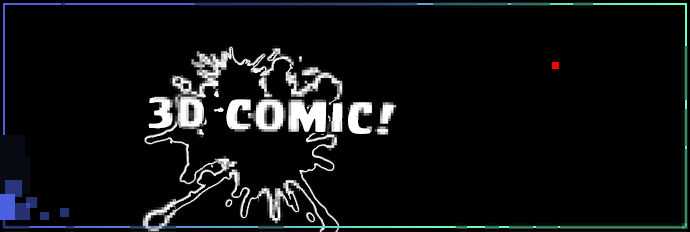
<style>
.page{position:relative;width:690px;height:232px;background:#000000}
.page>*{position:absolute;margin:0}
.t1{font:37.4px "CCBattleCry";letter-spacing:0.04em;color:#ffffff;scale:1.45 1}
</style>
<div class="page">
<p class="t1" style="left:148px;top:97px;width:247px;height:37px;rotate:2deg">3D comic!</p>
</div>
